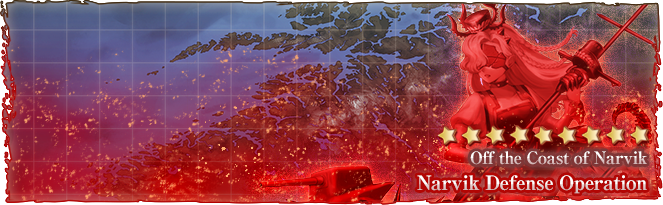
<style>
.page{position:relative;width:663px;height:205px}
.page>*{position:absolute;margin:0}
.t1{font:17px "RyuminPro-ExBold";letter-spacing:-0.04em}
.t2{font:20px "RyuminPro-ExBold";letter-spacing:-0.04em}
</style>
<div class="page">
<p class="t1" style="left:470px;top:151px;width:177px;height:14px">Off the Coast of Narvik</p>
<p class="t2" style="left:417px;top:175px;width:230px;height:19px">Narvik Defense Operation</p>
</div>
